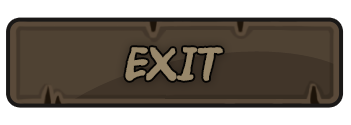
<style>
.page{position:relative;width:351px;height:125px;background:#ffffff}
.page>*{position:absolute;margin:0}
.t1{font:48.6px "SangSangFlowerRoad";letter-spacing:-0.025em;color:#98876a;text-transform:uppercase;font-weight:bold;font-style:italic}
</style>
<div class="page">
<p class="t1" style="left:125px;top:47px;width:98px;height:34px">Exit</p>
</div>
